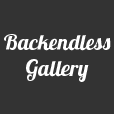
<style>
.page{position:relative;width:114px;height:114px;background:#333333}
.page>*{position:absolute;margin:0}
.t1{font:22px "Lobster1.4";color:#ffffff}
</style>
<div class="page">
<p class="t1" style="left:4px;top:34px;width:107px;height:48px;text-align:center">Backendless<br>Gallery</p>
</div>
